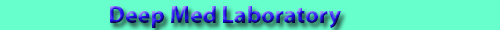
<style>
.page{position:relative;width:500px;height:30px;background:#67ffcc}
.page>*{position:absolute;margin:0}
.t1{font:24px "MyriadHebrew-Bold"}
</style>
<div class="page">
<p class="t1" style="left:110px;top:6px;width:231px;height:22px">Deep Med Laboratory</p>
</div>
